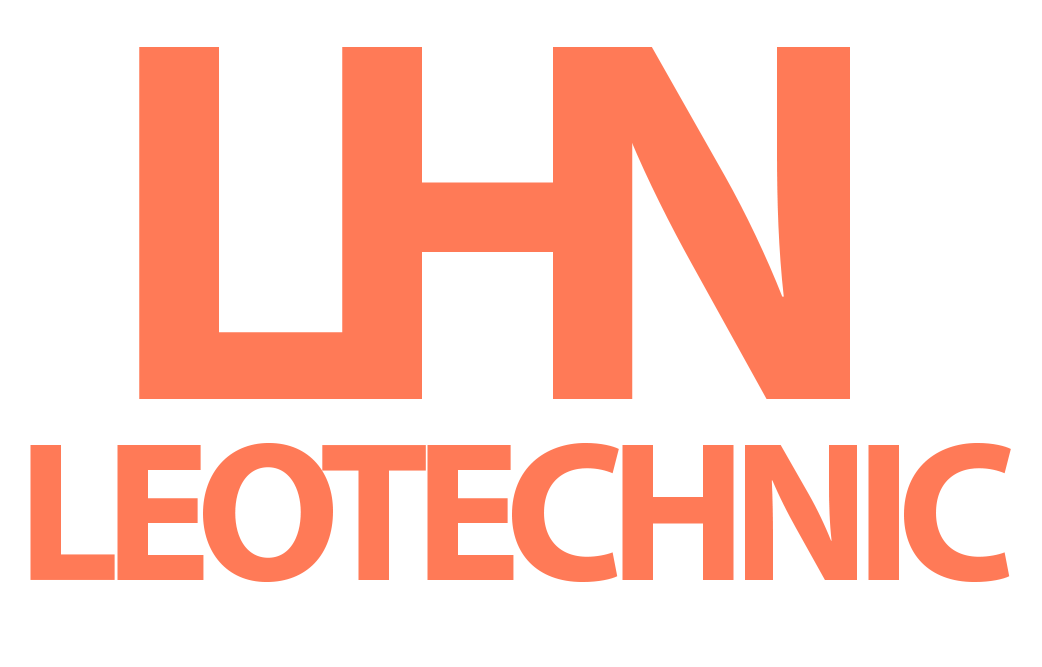
<style>
.page{position:relative;width:1042px;height:667px;background:#ffffff}
.page>*{position:absolute;margin:0}
.t1{font:521.6px "MyriadPro-Bold";letter-spacing:-0.075em;color:#ff7a57}
.t2{font:200px "MyriadPro-Bold";letter-spacing:-0.075em;color:#ff7a57}
</style>
<div class="page">
<p class="t1" style="left:139px;top:47px;width:220px;height:352px">L</p>
<p class="t1" style="left:342px;top:47px;width:291px;height:352px">H</p>
<p class="t1" style="left:559px;top:47px;width:291px;height:352px">N</p>
<p class="t2" style="left:30px;top:442px;width:981px;height:140px">LEOTECHNIC</p>
</div>
